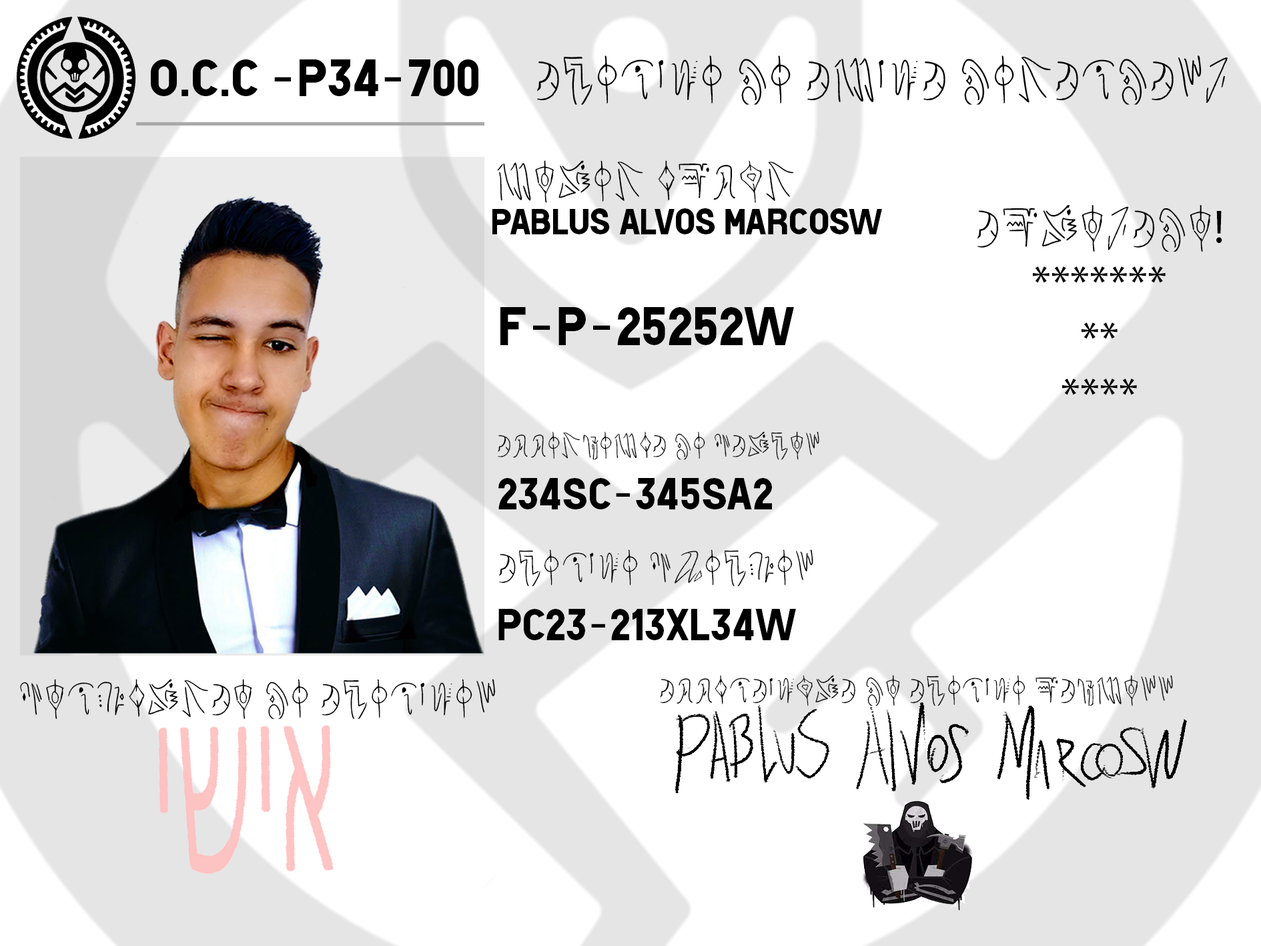
<style>
.page{position:relative;width:1261px;height:946px;background:#ffffff}
.page>*{position:absolute;margin:0}
.t1{font:41.9px "AsterAgency-Regular";color:#000000}
.t2{font:36.7px "HotelDeParisXe";color:#000000}
.t3{font:46.6px "MyriadPro-Regular";color:#000000}
.t4{font:46.6px "AsterAgency-Regular";color:#000000}
.t5{font:54.7px "HotelDeParisXe";color:#000000}
.t6{font:27.6px "AsterAgency-Regular";color:#000000}
.t7{font:44.4px "HotelDeParisXe";color:#000000}
.t8{font:36.4px "AsterAgency-Regular";color:#000000}
.t9{font:30.2px "AsterAgency-Regular";color:#000000}
.t10{font:39.5px "AsterAgency-Regular";color:#000000}
</style>
<div class="page">
<p class="t1" style="left:497px;top:160px;width:297px;height:43px">Lorem Ipsum</p>
<p class="t2" style="left:492px;top:208px;width:390px;height:26px">Pablus Alvos marcosw</p>
<p class="t3" style="left:978px;top:205px;width:244px;height:190px;text-align:center"><span class="t4">APROVADO</span>!<br>*******<br>**<br>****</p>
<p class="t5" style="left:500px;top:307px;width:294px;height:38px">f-p-25252w</p>
<p class="t6" style="left:498px;top:431px;width:321px;height:29px">assembelia de cargow</p>
<p class="t7" style="left:498px;top:478px;width:274px;height:31px">234sc-345sa2</p>
<p class="t8" style="left:499px;top:549px;width:314px;height:37px">agente chegfew</p>
<p class="t7" style="left:498px;top:609px;width:298px;height:31px">pc23-213xl34w</p>
<p class="t9" style="left:660px;top:675px;width:513px;height:31px">assinatura do agente pabloww</p>
<p class="t10" style="left:20px;top:679px;width:476px;height:40px">confirmao de agentew</p>
</div>
